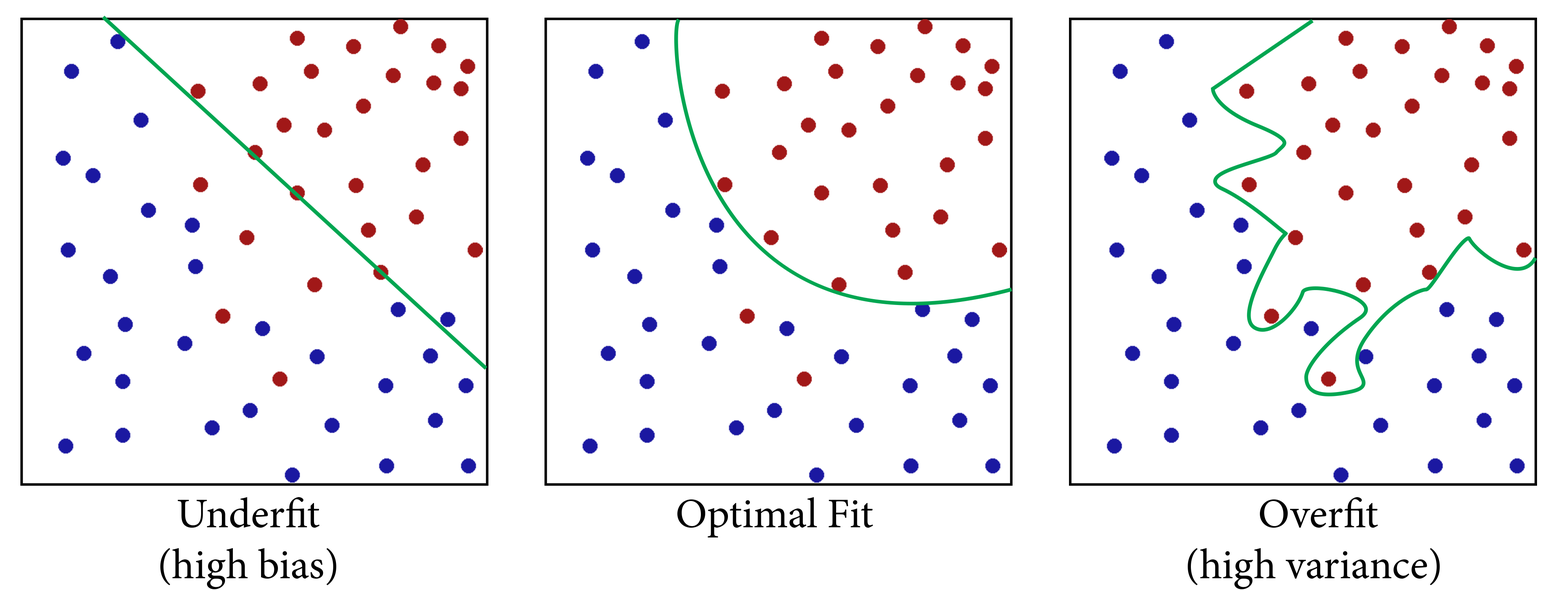
<style>
.page{position:relative;width:1568px;height:590px;background:#ffffff}
.page>*{position:absolute;margin:0}
.t1{font:42.3px "MinionPro-Regular";color:#000000}
</style>
<div class="page">
<p class="t1" style="left:160px;top:497px;width:1280px;height:92px">Underfit                                     Optimal Fit                                        Overfit<br>         (high bias)                                                                                        (high variance)</p>
</div>
